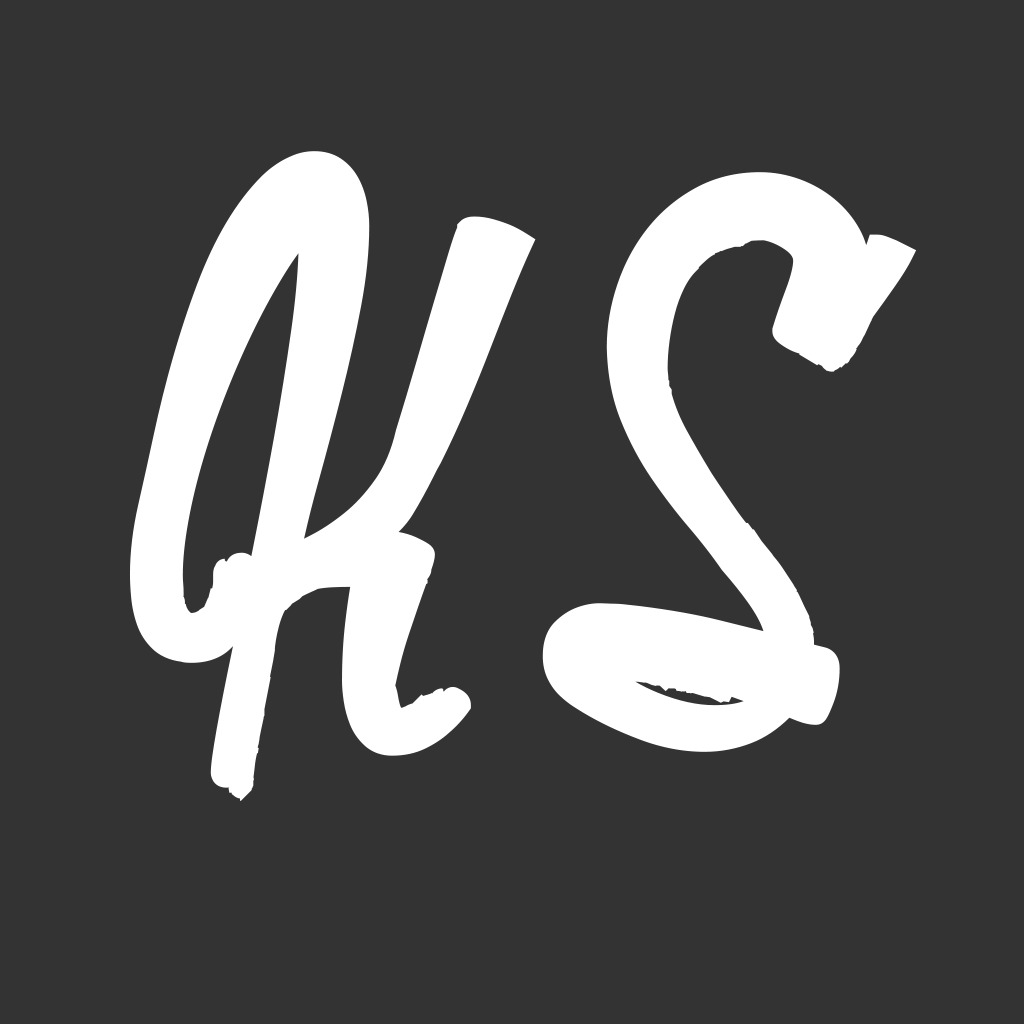
<style>
.page{position:relative;width:1024px;height:1024px;background:#333333}
.page>*{position:absolute;margin:0}
.t1{font:800px "OlympicBranding";letter-spacing:0.1em;color:#ffffff;text-transform:uppercase;font-weight:bold}
</style>
<div class="page">
<p class="t1" style="left:129px;top:151px;width:788px;height:650px">KS</p>
</div>
